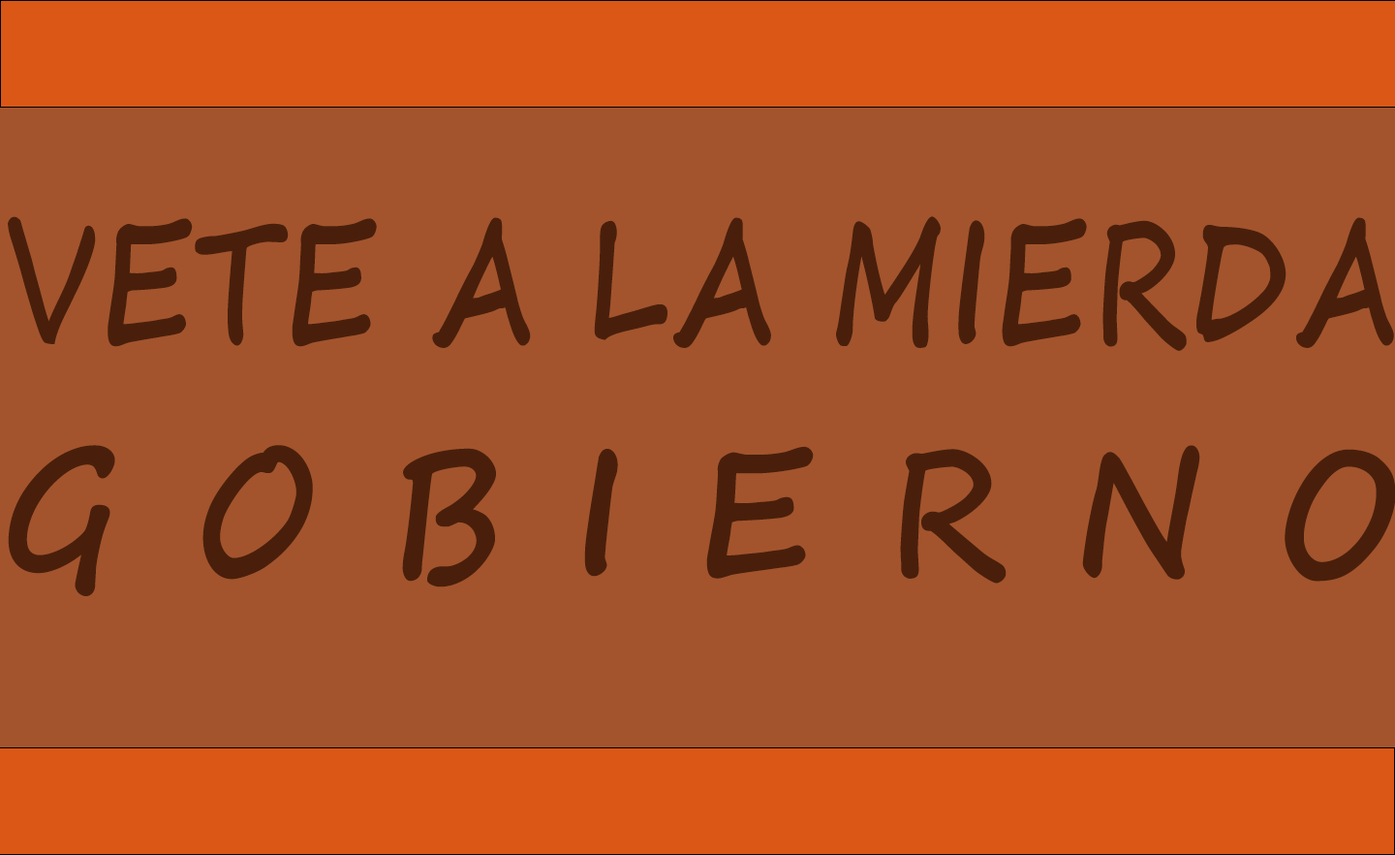
<style>
.page{position:relative;width:1395px;height:855px;background:#a3542d}
.page>*{position:absolute;margin:0}
.t1{font:170.4px "SegoeScript-Bold";letter-spacing:0.04em;color:#491f0b;text-transform:uppercase;scale:0.71 1}
.t2{font:175.5px "SegoeScript-Bold";letter-spacing:0.48em;color:#491f0b;text-transform:uppercase;scale:0.87 1}
</style>
<div class="page">
<p class="t1" style="left:8px;top:216px;width:1386px;height:135px">Vete a la mierda</p>
<p class="t2" style="left:8px;top:445px;width:1388px;height:151px">Gobierno</p>
</div>
